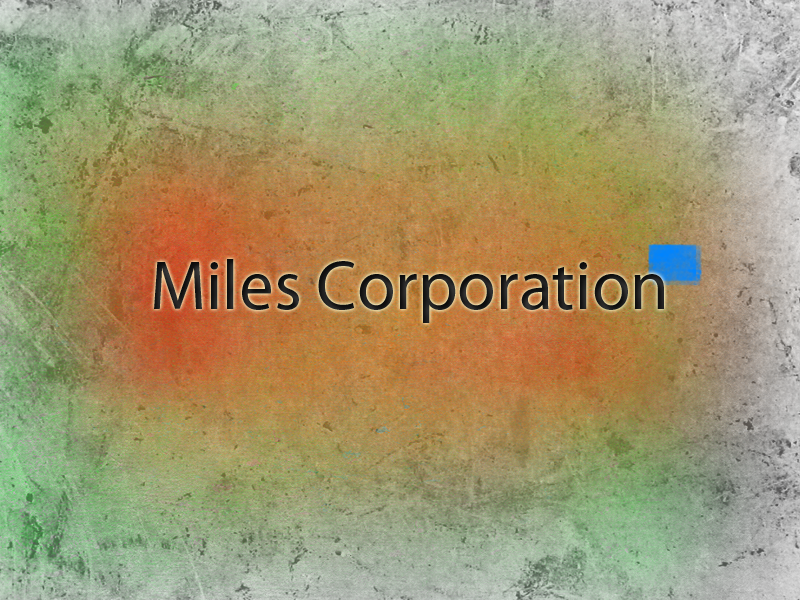
<style>
.page{position:relative;width:800px;height:600px}
.page>*{position:absolute;margin:0}
.t1{font:69.7px "MyriadPro-Regular";color:#1b1b1b}
</style>
<div class="page">
<p class="t1" style="left:154px;top:259px;width:510px;height:64px">Miles Corporation</p>
</div>
